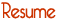
<style>
.page{position:relative;width:57px;height:20px;background:#ffffff}
.page>*{position:absolute;margin:0}
.t1{font:22px "BelleroseLight";letter-spacing:-0.01em;color:#cc3300;scale:0.91 1}
</style>
<div class="page">
<p class="t1" style="left:1px;top:2px;width:55px;height:17px">Resume</p>
</div>
